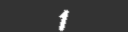
<style>
.page{position:relative;width:128px;height:32px;background:#333333}
.page>*{position:absolute;margin:0}
.t1{font:30.6px "DomDiagonalBT-Bold";color:#ffffff;scale:1.08 1}
</style>
<div class="page">
<p class="t1" style="left:59px;top:10px;width:10px;height:21px">1</p>
</div>
